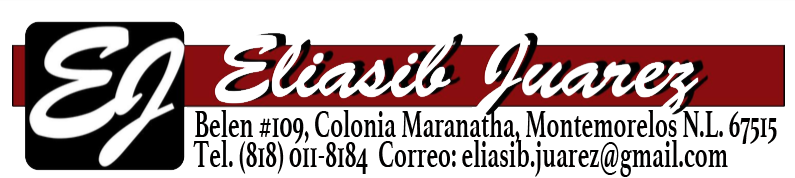
<style>
.page{position:relative;width:795px;height:178px;background:#ffffff}
.page>*{position:absolute;margin:0}
.t1{font:39.5px "Athelas-Bold";color:#010000;scale:0.61 1}
</style>
<div class="page">
<p class="t1" style="left:195px;top:110px;width:582px;height:34px">Belen #109, Colonia Maranatha, Montemorelos N.L. 67515</p>
<p class="t1" style="left:193px;top:140px;width:535px;height:37px">Tel. (818) 011-8184  Correo: eliasib.juarez@gmail.com</p>
</div>
